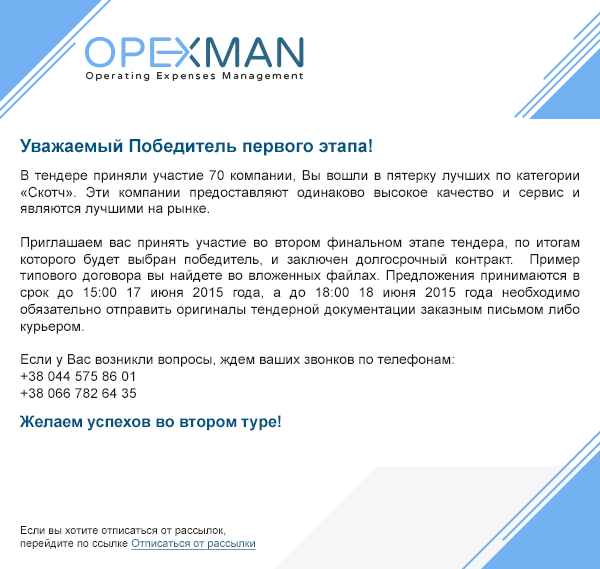
<style>
.page{position:relative;width:600px;height:569px;background:#ffffff}
.page>*{position:absolute;margin:0}
.t1{font:17.9px "Arial-BoldMT";color:#00557f}
.t2{font:13.9px "ArialMT";color:#181818}
.t3{font:15.9px "Arial-BoldMT";color:#00557f}
.t4{font:11px "ArialMT";color:#212121}
.t5{font:11px "ArialMT";color:#2c6789;text-decoration:underline}
</style>
<div class="page">
<p class="t1" style="left:20px;top:138px;width:352px;height:18px">Уважаемый Победитель первого этапа!</p>
<p class="t2" style="left:20px;top:170px;width:560px;height:228px;text-align:justify">В тендере приняли участие 70 компании, Вы вошли в пятерку лучших по категории «Скотч». Эти компании предоставляют одинаково высокое качество и сервис и являются лучшими на рынке.<br><br>Приглашаем вас принять участие во втором финальном этапе тендера, по итогам которого будет выбран победитель, и заключен долгосрочный контракт.  Пример типового договора вы найдете во вложенных файлах. Предложения принимаются в срок до 15:00 17 июня 2015 года, а до 18:00 18 июня 2015 года необходимо обязательно отправить оригиналы тендерной документации заказным письмом либо курьером.<br><br>Если у Вас возникли вопросы, ждем ваших звонков по телефонам:<br>+38 044 575 86 01<br>+38 066 782 64 35</p>
<p class="t3" style="left:20px;top:415px;width:261px;height:16px">Желаем успехов во втором туре!</p>
<p class="t4" style="left:20px;top:526px;width:236px;height:24px;text-align:justify">Если вы хотите отписаться от рассылок, <br>перейдите по ссылке <span class="t5">Отписаться от рассылки</span></p>
</div>
